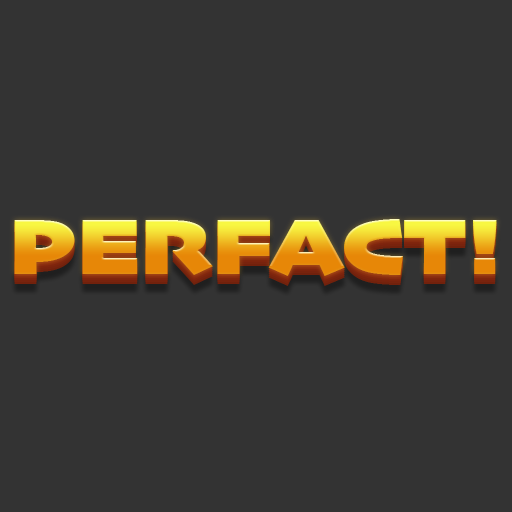
<style>
.page{position:relative;width:512px;height:512px;background:#333333}
.page>*{position:absolute;margin:0}
.t1{font:83.3px "Skia-BlackExtended";letter-spacing:-0.005em;scale:0.95 1}
</style>
<div class="page">
<p class="t1" style="left:14px;top:219px;width:483px;height:57px">PERFACT!</p>
</div>
